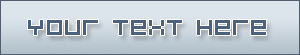
<style>
.page{position:relative;width:300px;height:55px;background:#dce4ec}
.page>*{position:absolute;margin:0}
.t1{font:24px "BitDustTwo";color:#4c617e}
</style>
<div class="page">
<p class="t1" style="left:28px;top:20px;width:238px;height:15px">Your text here</p>
</div>
